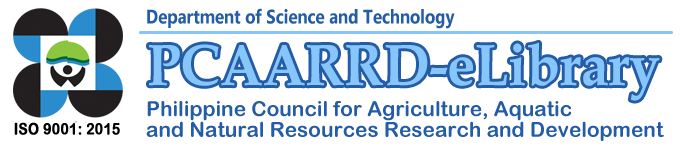
<style>
.page{position:relative;width:683px;height:150px;background:#ffffff}
.page>*{position:absolute;margin:0}
.t1{font:20.8px/20.8px "ArialRoundedMTBold";color:#245ca6}
.t2{font:15.8px "ArialRoundedMTBold";color:#010101;font-weight:bold;scale:0.87 1}
</style>
<div class="page">
<p class="t1" style="left:146px;top:101px;width:518px;height:40px">Philippine Council for Agriculture, Aquatic<br>and Natural Resources Research and Development</p>
<p class="t2" style="left:14px;top:122px;width:106px;height:13px">ISO 9001: 2015</p>
</div>
